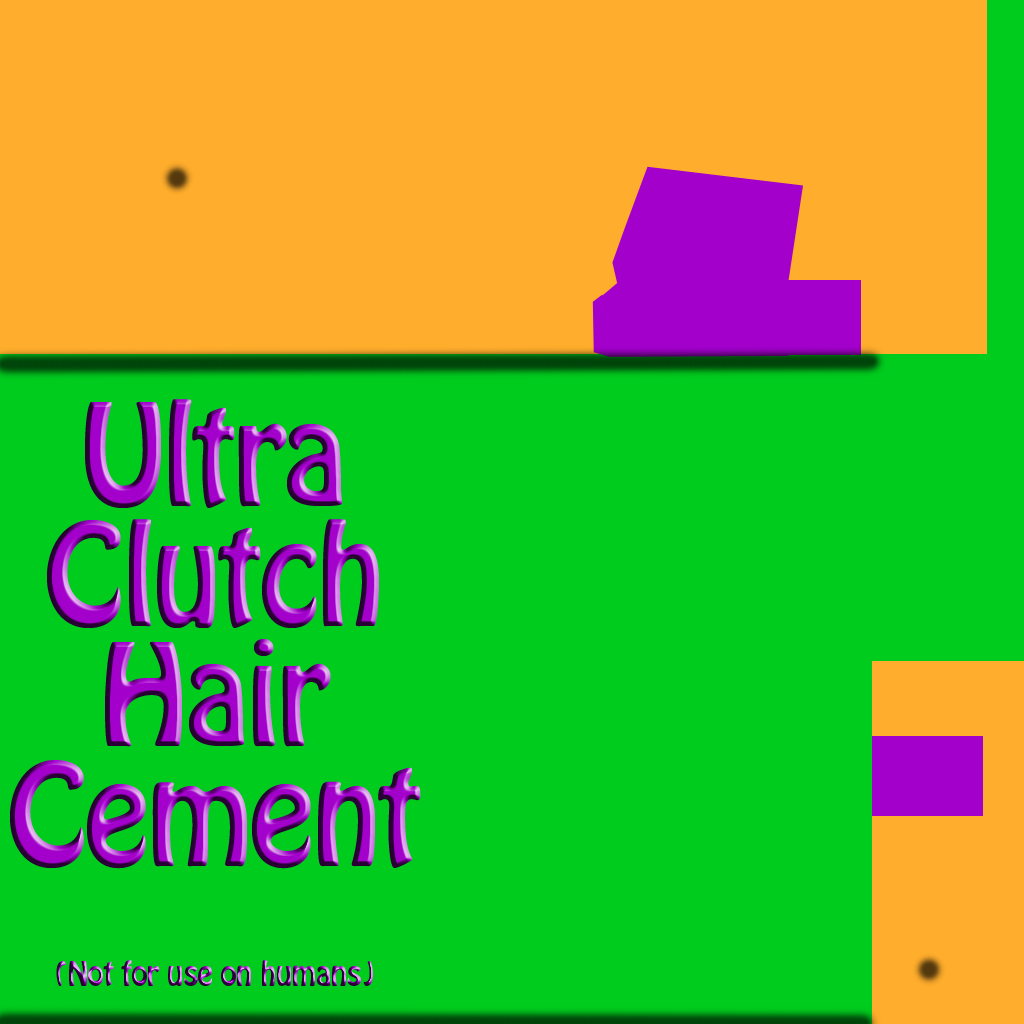
<style>
.page{position:relative;width:1024px;height:1024px;background:#00cc1d}
.page>*{position:absolute;margin:0}
.t1{font:125px/120px "HoboStd";letter-spacing:-0.025em}
.t2{font:30px/120px "HoboStd";letter-spacing:-0.025em}
</style>
<div class="page">
<p class="t1" style="left:10px;top:399px;width:411px;height:587px;text-align:center">Ultra<br>Clutch<br>Hair<br>Cement<br><span class="t2">(Not for use on humans)</span></p>
</div>
